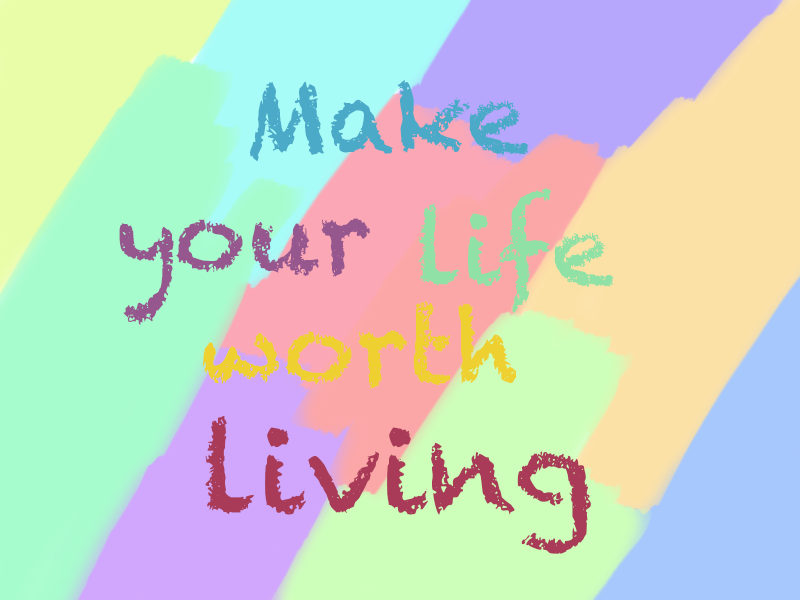
<style>
.page{position:relative;width:800px;height:600px}
.page>*{position:absolute;margin:0}
.t1{font:100px "Chalkduster";color:#4caac9}
.t2{font:100px "Chalkduster";color:#8fe1a6}
.t3{font:100px "Chalkduster";color:#96578f}
.t4{font:100px "Chalkduster";color:#eed131}
.t5{font:120px "Chalkduster";color:#a93a58}
</style>
<div class="page">
<p class="t1" style="left:250px;top:80px;width:279px;height:81px">Make</p>
<p class="t2" style="left:418px;top:188px;width:196px;height:125px">life</p>
<p class="t3" style="left:119px;top:218px;width:251px;height:107px">your</p>
<p class="t4" style="left:203px;top:301px;width:313px;height:88px">worth</p>
<p class="t5" style="left:205px;top:415px;width:386px;height:139px">living</p>
</div>
